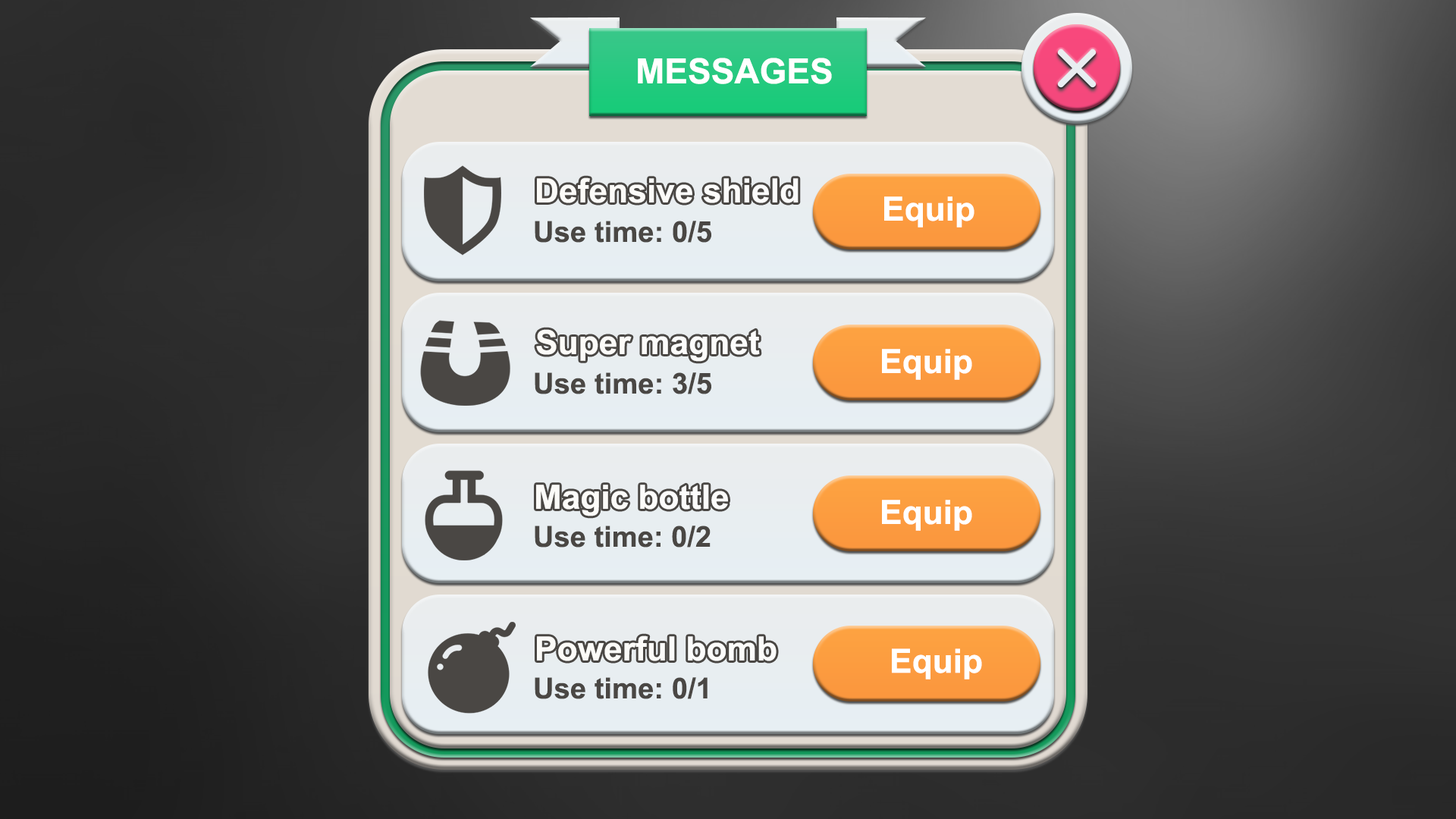
<style>
.page{position:relative;width:1456px;height:819px}
.page>*{position:absolute;margin:0}
.t1{font:34.9px "Arial-BoldMT";color:#ffffff}
.t2{font:33.5px "Arial-BoldMT";color:#ffffff}
.t3{font:33.4px "Arial-BoldMT";color:#ffffff}
.t4{font:28.9px "Arial-BoldMT";color:#4a4744}
</style>
<div class="page">
<p class="t1" style="left:638px;top:58px;width:194px;height:26px">MESSAGES</p>
<p class="t2" style="left:537px;top:177px;width:262px;height:26px">Defensive shield</p>
<p class="t3" style="left:884px;top:196px;width:90px;height:31px">Equip</p>
<p class="t4" style="left:535px;top:221px;width:176px;height:22px">Use time: 0/5</p>
<p class="t2" style="left:536px;top:329px;width:224px;height:33px">Super magnet</p>
<p class="t3" style="left:882px;top:349px;width:90px;height:31px">Equip</p>
<p class="t4" style="left:535px;top:372px;width:176px;height:22px">Use time: 3/5</p>
<p class="t2" style="left:536px;top:485px;width:192px;height:31px">Magic bottle</p>
<p class="t3" style="left:882px;top:500px;width:90px;height:31px">Equip</p>
<p class="t4" style="left:535px;top:526px;width:176px;height:22px">Use time: 0/2</p>
<p class="t2" style="left:537px;top:635px;width:240px;height:26px">Powerful bomb</p>
<p class="t3" style="left:892px;top:648px;width:90px;height:31px">Equip</p>
<p class="t4" style="left:535px;top:677px;width:173px;height:22px">Use time: 0/1</p>
</div>
